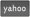
<style>
.page{position:relative;width:30px;height:17px}
.page>*{position:absolute;margin:0}
.t1{font:9px "TriplexLight";letter-spacing:0.01em;color:#dfdfdf;font-weight:bold}
</style>
<div class="page">
<p class="t1" style="left:3px;top:4px;width:23px;height:10px">yahoo</p>
</div>
